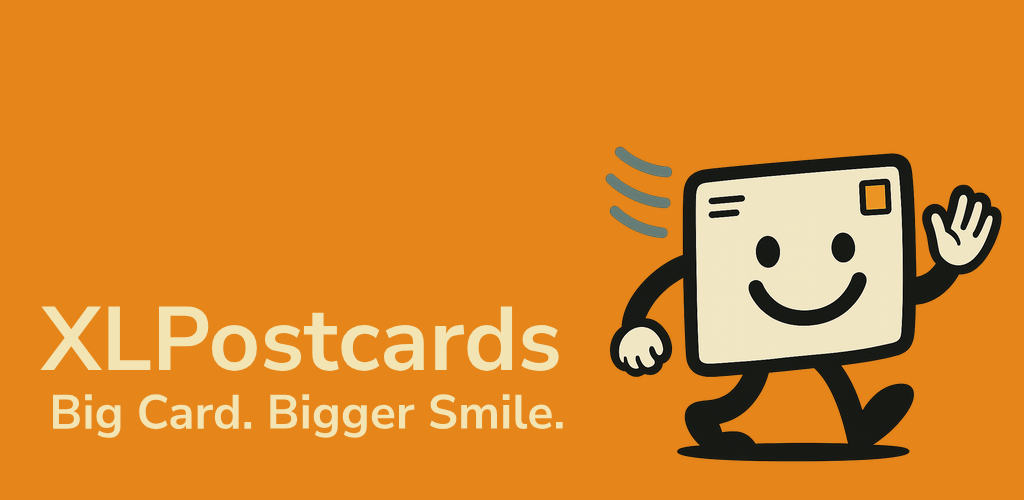
<style>
.page{position:relative;width:1024px;height:500px;background:#e5851a}
.page>*{position:absolute;margin:0}
.t1{font:90px "NunitoSans-Bold";color:#f3e4b3}
.t2{font:48px "NunitoSans-Bold";color:#f0e6c2}
</style>
<div class="page">
<p class="t1" style="left:40px;top:306px;width:519px;height:65px">XLPostcards</p>
<p class="t2" style="left:53px;top:394px;width:510px;height:44px">Big Card. Bigger Smile.</p>
</div>
